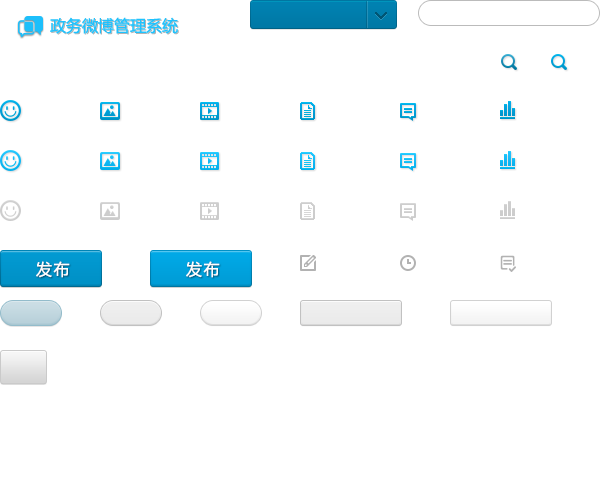
<style>
.page{position:relative;width:600px;height:500px;background:#ffffff}
.page>*{position:absolute;margin:0}
.t1{font:16px "MicrosoftYaHei";color:#20c2fd}
.t2{font:16px "MicrosoftYaHei";letter-spacing:0.1em;color:#fefeff}
</style>
<div class="page">
<p class="t1" style="left:50px;top:17px;width:128px;height:17px">政务微博管理系统</p>
<p class="t2" style="left:36px;top:261px;width:34px;height:17px">发布</p>
<p class="t2" style="left:186px;top:261px;width:34px;height:17px">发布</p>
</div>
